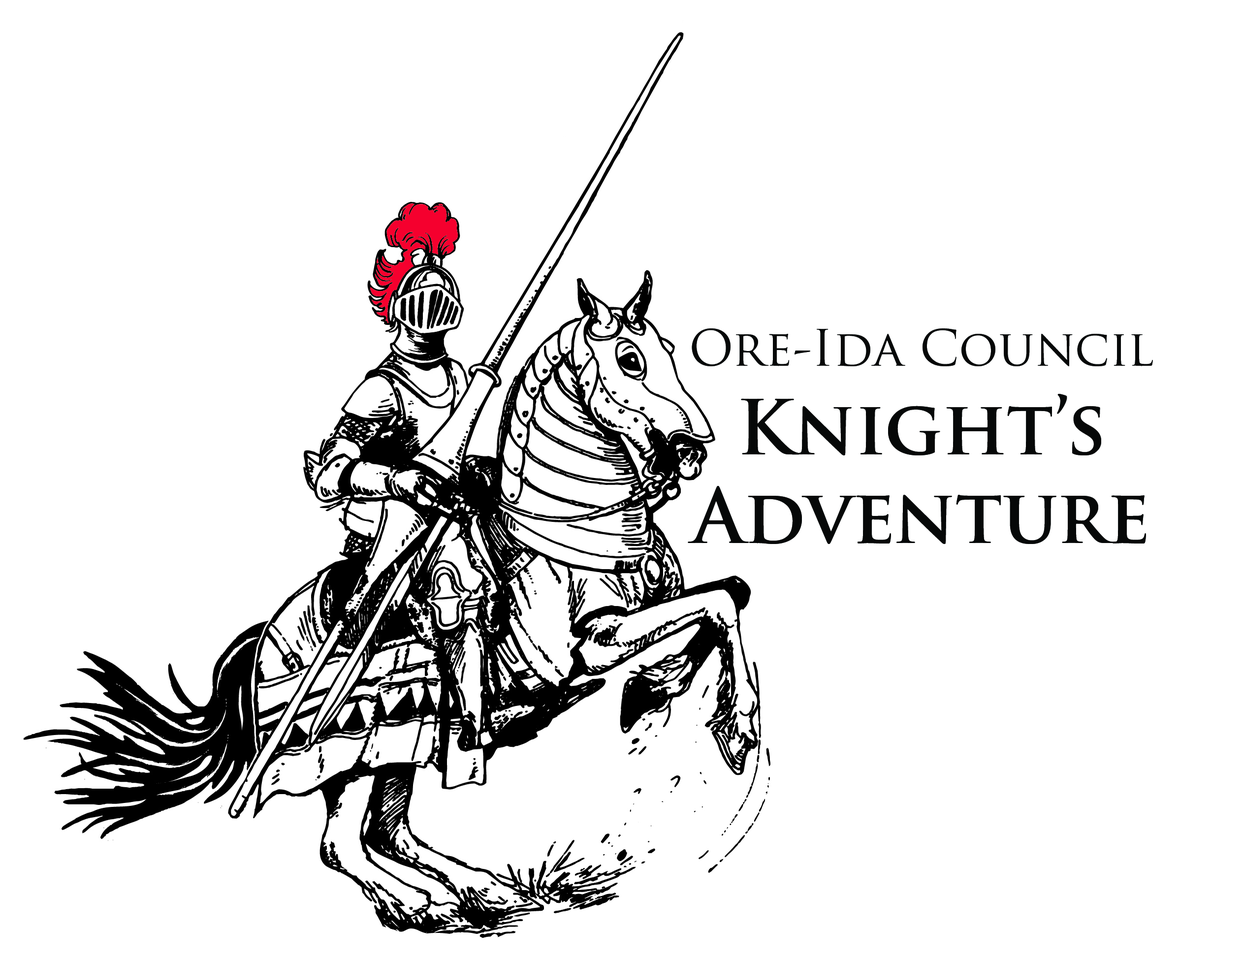
<style>
.page{position:relative;width:1243px;height:960px;background:#ffffff}
.page>*{position:absolute;margin:0}
.t1{font:73.8px "TrajanPro-Bold";color:#060808}
.t2{font:49.2px "TrajanPro-Regular";color:#060808}
</style>
<div class="page">
<p class="t1" style="left:687px;top:328px;width:466px;height:216px;text-align:center"><span class="t2">Ore-Ida Council<br></span>Knight’s <br>Adventure</p>
</div>
